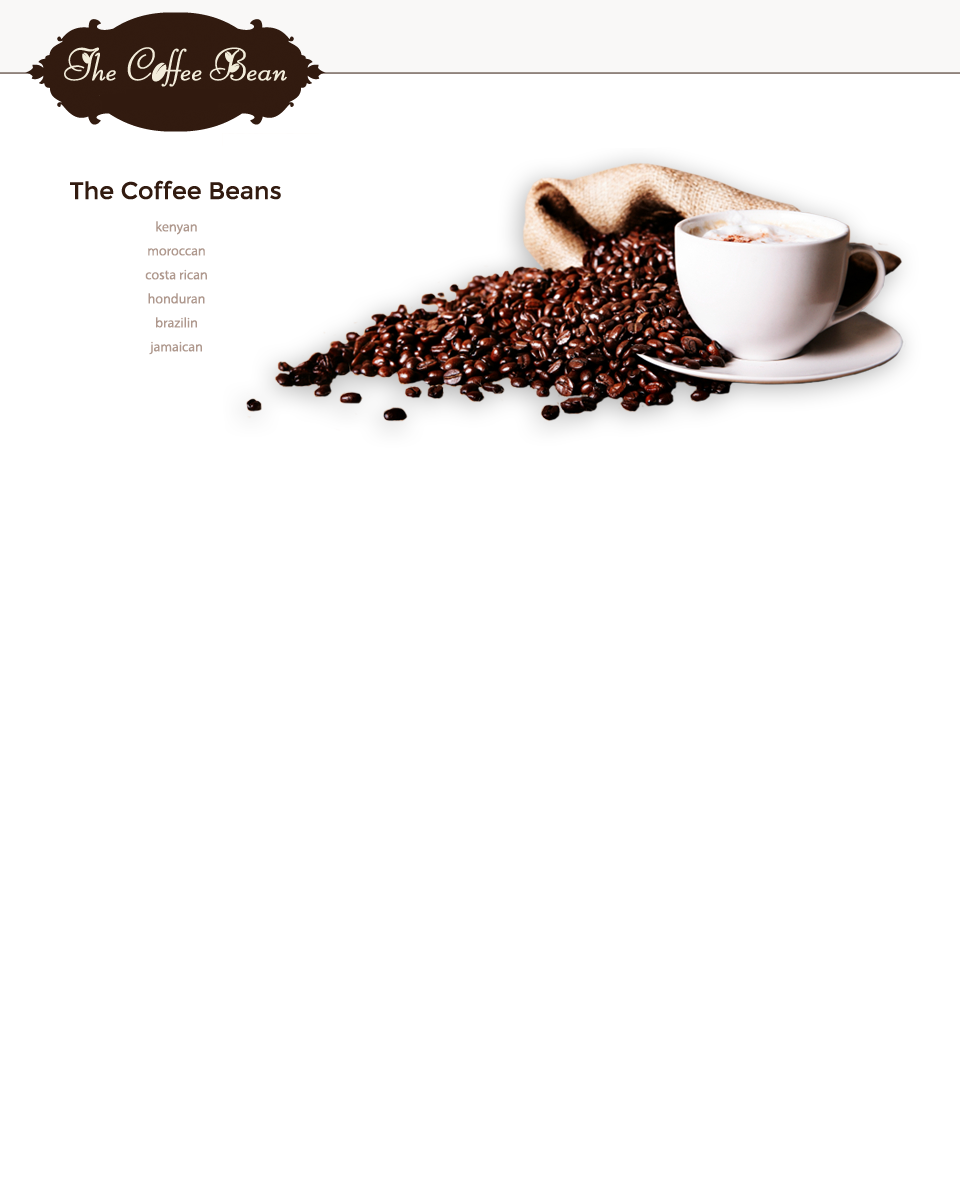
<style>
.page{position:relative;width:960px;height:1200px;background:#ffffff}
.page>*{position:absolute;margin:0}
.t1{font:24px "Montserrat-Regular";color:#321b10}
.t2{font:14px/24px "MyriadPro-Regular";color:#af988d}
</style>
<div class="page">
<p class="t1" style="left:70px;top:180px;width:211px;height:20px">The Coffee Beans</p>
<p class="t2" style="left:145px;top:221px;width:62px;height:134px;text-align:center">kenyan<br>moroccan<br>costa rican<br>honduran<br>brazilin<br>jamaican</p>
</div>
